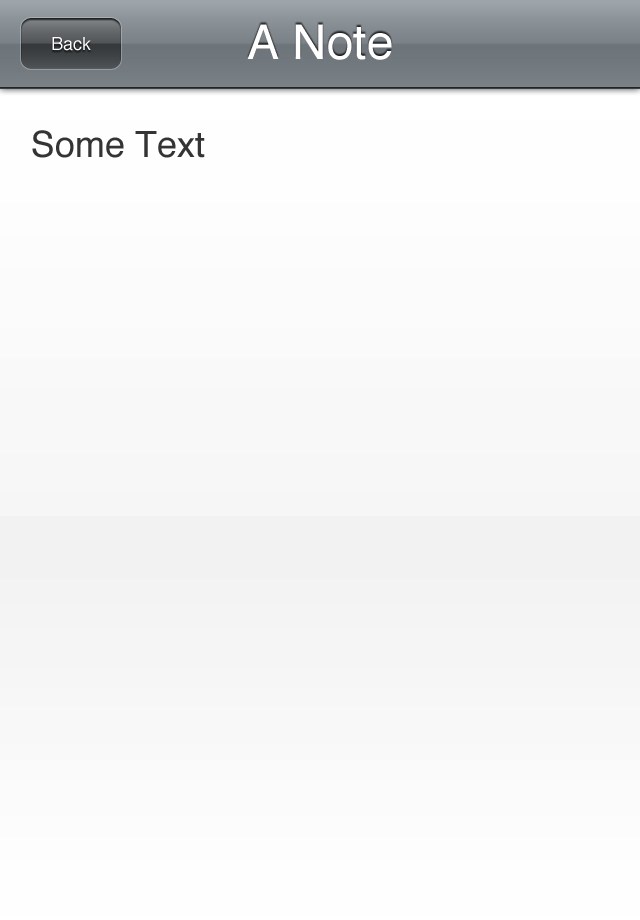
<style>
.page{position:relative;width:640px;height:920px}
.page>*{position:absolute;margin:0}
.t1{font:48px "Helvetica";color:#ffffff}
.t2{font:18px "Helvetica";color:#ffffff}
.t3{font:14px "Helvetica";color:#ffffff}
.t4{font:36px "Helvetica";color:#343434}
</style>
<div class="page">
<p class="t1" style="left:247px;top:24px;width:145px;height:36px">A Note</p>
<p class="t2" style="left:52px;top:37px;width:39px;height:14px"><span class="t3"><br></span>Back</p>
<p class="t4" style="left:32px;top:130px;width:173px;height:28px">Some Text</p>
</div>
